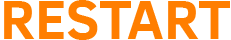
<style>
.page{position:relative;width:231px;height:40px;background:#ffffff}
.page>*{position:absolute;margin:0}
.t1{font:56px "ClearSans-Bold";color:#ff7e00}
</style>
<div class="page">
<p class="t1" style="left:4px;top:0px;width:226px;height:40px">RESTART</p>
</div>
